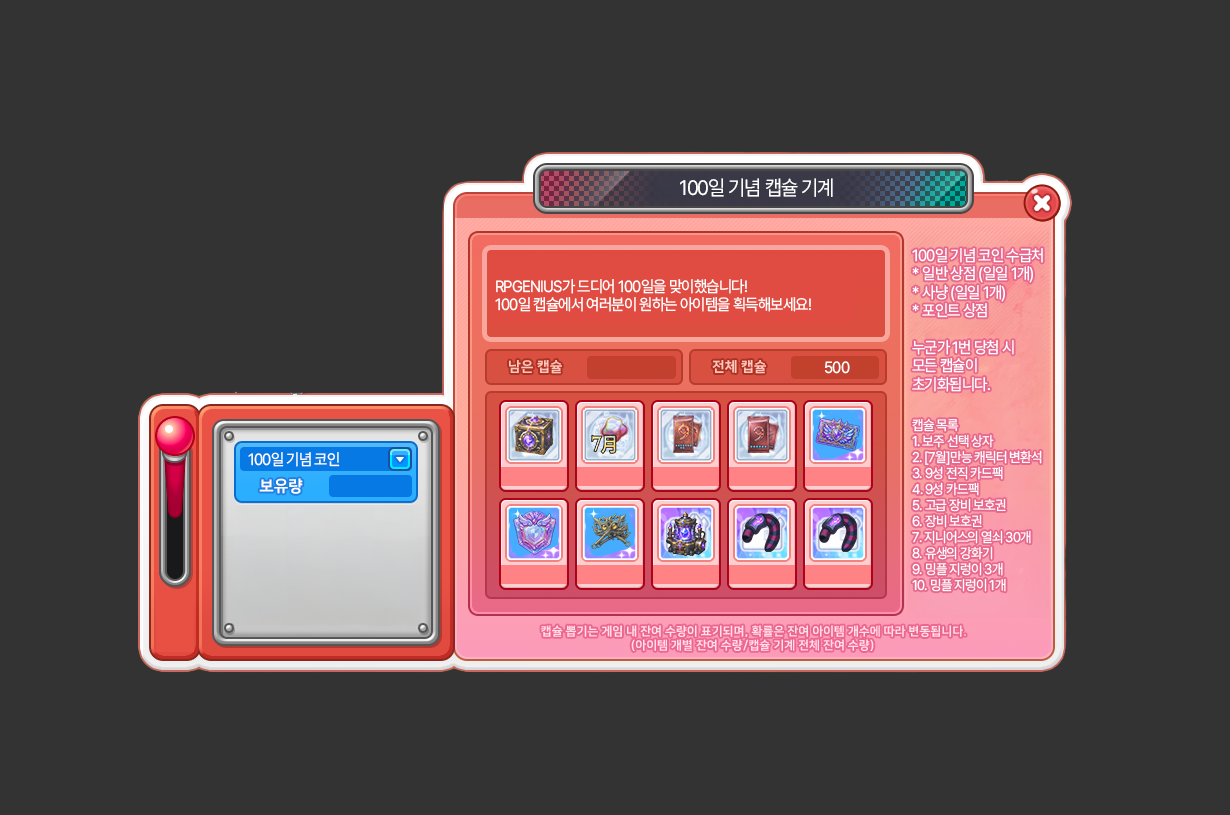
<style>
.page{position:relative;width:1230px;height:815px;background:#333333}
.page>*{position:absolute;margin:0}
.t1{font:15.6px "Pretendard-Regular";letter-spacing:-0.05em;color:#ffffff;scale:0.95 1}
.t2{font:12.1px "Pretendard-Regular";letter-spacing:-0.05em;color:#ffffff;scale:0.95 1}
.t3{font:12.1px "Pretendard-Regular";letter-spacing:0.2em;color:#ffffff;scale:0.95 1}
.t4{font:14px "Pretendard-Regular";letter-spacing:-0.05em;color:#ffffff;scale:0.95 1}
</style>
<div class="page">
<p class="t1" style="left:680px;top:178px;width:153px;height:19px">100일 기념 캡슐 기계</p>
<p class="t2" style="left:912px;top:248px;width:131px;height:70px">100일 기념 코인 수급처<br><span class="t3">*</span>일반 상점 (일일 1개)<br><span class="t3">*</span>사냥 (일일 1개)<br><span class="t3">*</span>포인트 상점</p>
<p class="t2" style="left:495px;top:279px;width:316px;height:33px">RPGENIUS가 드디어 100일을 맞이했습니다!<br>100일 캡슐에서 여러분이 원하는 아이템을 획득해보세요!</p>
<p class="t2" style="left:912px;top:340px;width:102px;height:52px">누군가 1번 당첨 시<br>모든 캡슐이<br>초기화됩니다.</p>
<p class="t2" style="left:825px;top:361px;width:25px;height:13px">500</p>
<p class="t4" style="left:912px;top:418px;width:130px;height:174px">캡슐 목록<br>1. 보주 선택 상자<br>2. [7월]만능 캐릭터 변환석<br>3. 9성 전직 카드팩<br>4. 9성 카드팩<br>5. 고급 장비 보호권<br>6. 장비 보호권<br>7. 지니어스의 열쇠 30개<br>8. 유생의 강화기<br>9. 밍플 지렁이 3개<br>10. 밍플 지렁이 1개</p>
<p class="t2" style="left:248px;top:452px;width:92px;height:15px">100일 기념 코인</p>
</div>
